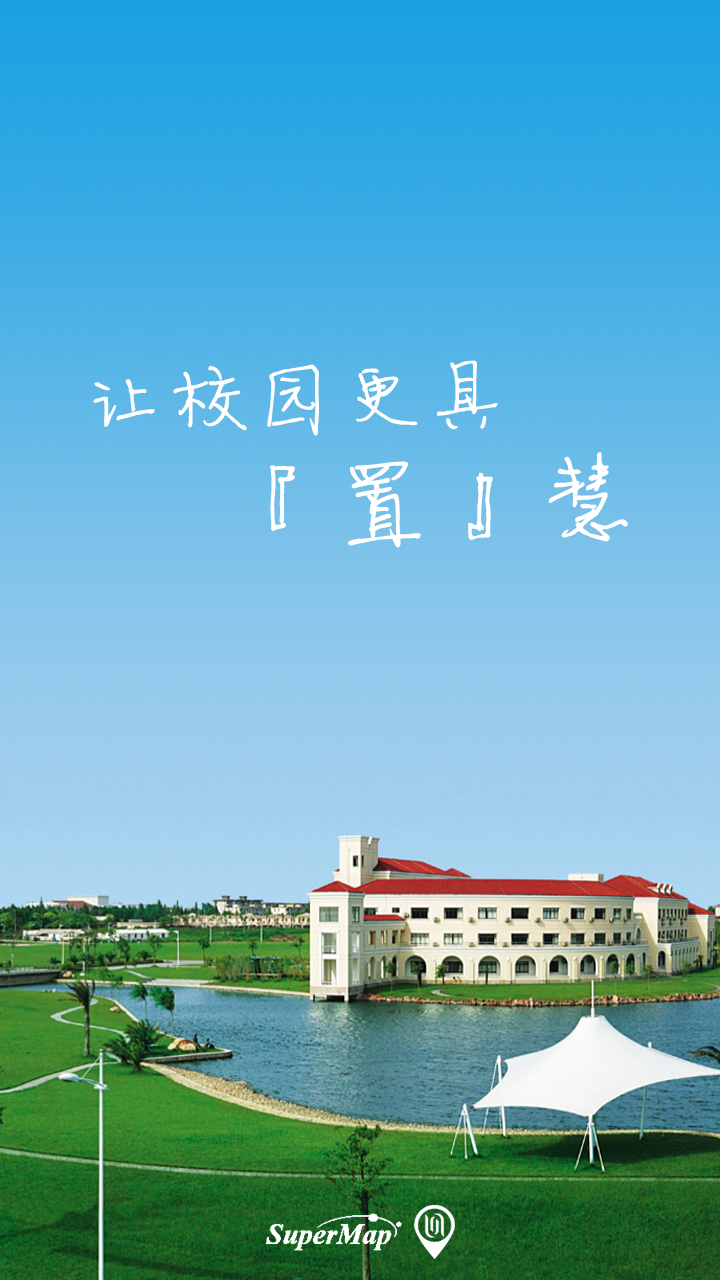
<style>
.page{position:relative;width:720px;height:1280px}
.page>*{position:absolute;margin:0}
.t1{font:83.3px/100px "FZJLJW--GB1-0";color:#ffffff;font-weight:bold}
.t2{font:100px/100px "FZJLJW--GB1-0";color:#ffffff;font-weight:bold}
</style>
<div class="page">
<p class="t1" style="left:93px;top:360px;width:535px;height:188px;text-align:center;rotate:-1deg">让校园更具<br><span class="t2">         『置』慧</span></p>
</div>
